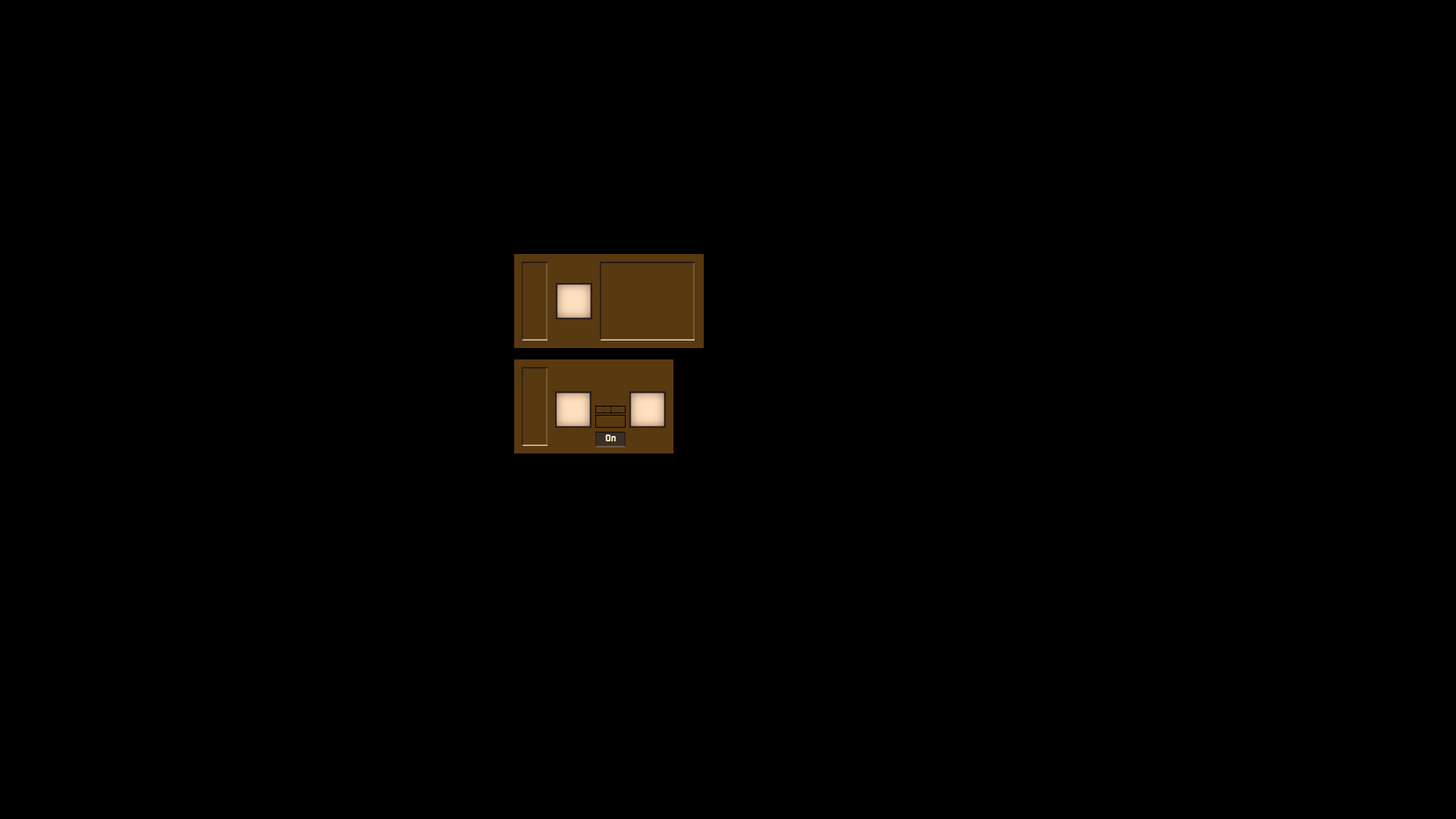
<style>
.page{position:relative;width:1456px;height:819px;background:#000000}
.page>*{position:absolute;margin:0}
.t1{font:9.5px "ContinuumBold";letter-spacing:0.01em;color:#fde0c0}
</style>
<div class="page">
<p class="t1" style="left:605px;top:435px;width:11px;height:6px">On</p>
</div>
